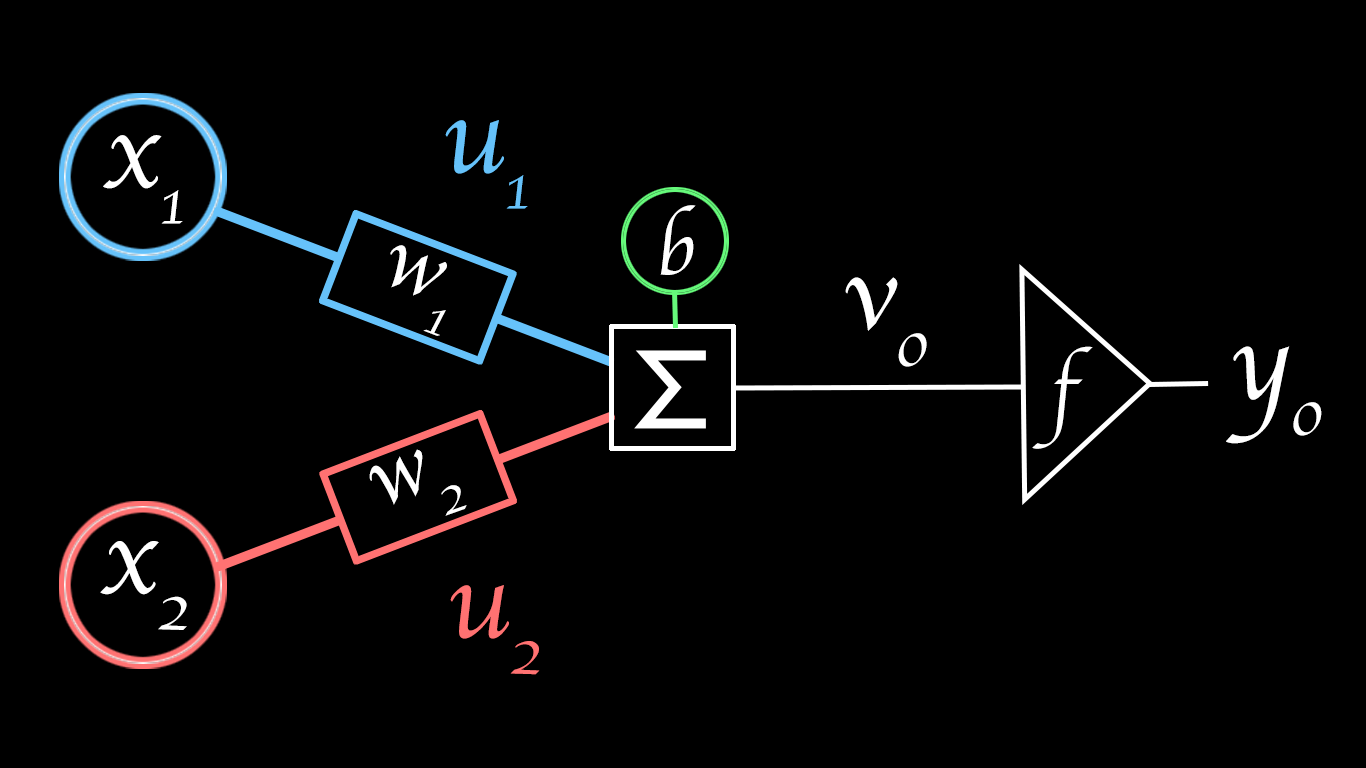
<style>
.page{position:relative;width:1366px;height:768px;background:#000000}
.page>*{position:absolute;margin:0}
.t1{font:110px "Apple-Chancery";color:#66c2fa}
.t2{font:110px "Apple-Chancery";color:#ffffff}
.t3{font:80px "Apple-Chancery";color:#ffffff}
.t4{font:90px "Apple-Chancery";color:#ffffff}
.t5{font:110px "Apple-Chancery";color:#ff7272}
</style>
<div class="page">
<p class="t1" style="left:445px;top:120px;width:83px;height:89px">u1</p>
<p class="t2" style="left:103px;top:135px;width:80px;height:89px">x1</p>
<p class="t3" style="left:660px;top:205px;width:36px;height:70px">b</p>
<p class="t4" style="left:390px;top:245px;width:57px;height:91px;rotate:21deg">w1</p>
<p class="t2" style="left:845px;top:277px;width:82px;height:90px">v0</p>
<p class="t3" style="left:1032px;top:346px;width:61px;height:103px">f</p>
<p class="t2" style="left:1226px;top:346px;width:96px;height:98px">y0</p>
<p class="t4" style="left:369px;top:449px;width:98px;height:67px;rotate:-21deg">w2</p>
<p class="t2" style="left:100px;top:541px;width:87px;height:89px">x2</p>
<p class="t5" style="left:450px;top:585px;width:90px;height:90px">u2</p>
</div>
